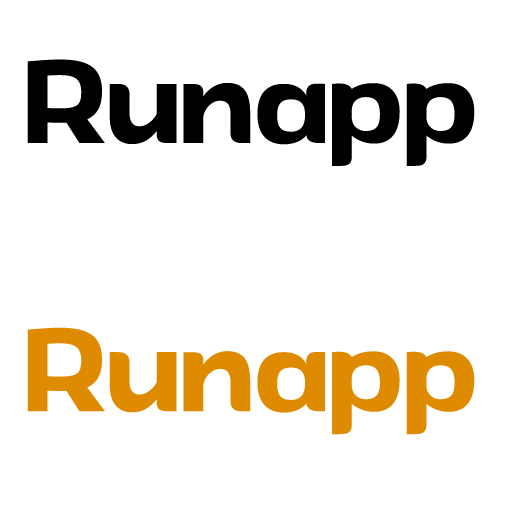
<style>
.page{position:relative;width:512px;height:512px;background:#ffffff}
.page>*{position:absolute;margin:0}
.t1{font:118.1px/268.2px "Andor-PersonalUse";letter-spacing:0.025em;color:#000001}
.t2{font:118.1px/268.2px "Andor-PersonalUse";letter-spacing:0.025em;color:#df8b01}
</style>
<div class="page">
<p class="t1" style="left:27px;top:59px;width:448px;height:376px;text-align:center">Runapp<br><span class="t2">Runapp</span></p>
</div>
